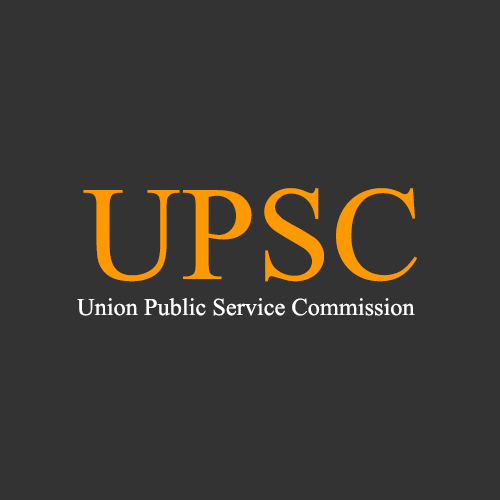
<style>
.page{position:relative;width:500px;height:500px;background:#333333}
.page>*{position:absolute;margin:0}
.t1{font:200px "Microsoft-Himalaya";color:#ff9900}
.t2{font:36px "Microsoft-Himalaya";color:#ffffff}
</style>
<div class="page">
<p class="t1" style="left:83px;top:188px;width:334px;height:94px">UPSC</p>
<p class="t2" style="left:77px;top:298px;width:338px;height:18px">Union Public Service Commission</p>
</div>
